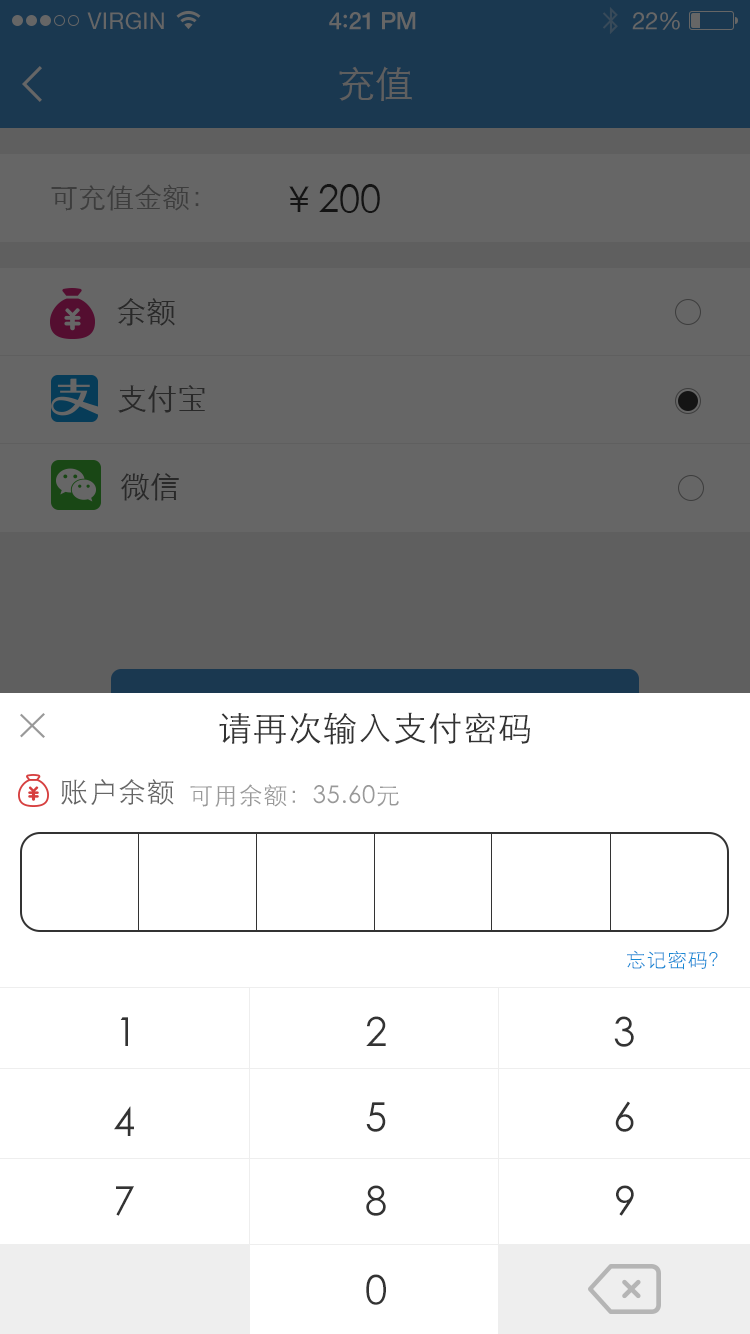
<style>
.page{position:relative;width:750px;height:1334px;background:#ffffff}
.page>*{position:absolute;margin:0}
.t1{font:23px "HelveticaNeue";letter-spacing:0.02em;color:#666666}
.t2{font:24px "HelveticaNeue-Medium";letter-spacing:-0.02em;color:#666666}
.t3{font:26px "Avenir-Medium";letter-spacing:-0.02em;color:#666666}
.t4{font:24px "HelveticaNeue";letter-spacing:-0.02em;color:#666666}
.t5{font:38px "STXihei";color:#5f5f5f}
.t6{font:28px "STXihei";color:#3d3d3d}
.t7{font:38px "STXihei";color:#141414}
.t8{font:30px "STXihei";color:#292929}
.t9{font:34px "STXihei";letter-spacing:0.03em;color:#333333}
.t10{font:28px "STXihei";letter-spacing:0.03em;color:#666666}
.t11{font:24px "STXihei";letter-spacing:0.03em;color:#999999}
.t12{font:20px "STXihei";letter-spacing:0.03em;color:#1789d5}
.t13{font:40px "STXihei";letter-spacing:0.03em;color:#333333}
</style>
<div class="page">
<p class="t1" style="left:87px;top:12px;width:77px;height:18px">VIRGIN</p>
<p class="t2" style="left:329px;top:12px;width:87px;height:18px">4<span class="t3">:</span>21 PM</p>
<p class="t4" style="left:632px;top:12px;width:48px;height:18px">22%</p>
<p class="t5" style="left:339px;top:66px;width:73px;height:35px">充值</p>
<p class="t6" style="left:51px;top:184px;width:148px;height:27px">可充值金额：</p>
<p class="t7" style="left:289px;top:184px;width:91px;height:29px">￥200</p>
<p class="t8" style="left:117px;top:298px;width:58px;height:28px">余额</p>
<p class="t8" style="left:118px;top:385px;width:87px;height:28px">支付宝</p>
<p class="t8" style="left:120px;top:473px;width:59px;height:28px">微信</p>
<p class="t9" style="left:219px;top:712px;width:311px;height:33px">请再次输入支付密码</p>
<p class="t10" style="left:61px;top:779px;width:113px;height:26px">账户余额</p>
<p class="t11" style="left:190px;top:784px;width:209px;height:23px">可用余额：35.60元</p>
<p class="t12" style="left:627px;top:950px;width:91px;height:20px">忘记密码？</p>
<p class="t13" style="left:120px;top:1017px;width:8px;height:29px">1</p>
<p class="t13" style="left:366px;top:1016px;width:20px;height:30px">2</p>
<p class="t13" style="left:614px;top:1016px;width:20px;height:31px">3</p>
<p class="t13" style="left:114px;top:1106px;width:20px;height:30px">4</p>
<p class="t13" style="left:366px;top:1102px;width:20px;height:30px">5</p>
<p class="t13" style="left:615px;top:1101px;width:19px;height:31px">6</p>
<p class="t13" style="left:116px;top:1186px;width:18px;height:30px">7</p>
<p class="t13" style="left:366px;top:1185px;width:20px;height:31px">8</p>
<p class="t13" style="left:616px;top:1185px;width:18px;height:31px">9</p>
<p class="t13" style="left:366px;top:1274px;width:20px;height:31px">0</p>
</div>
